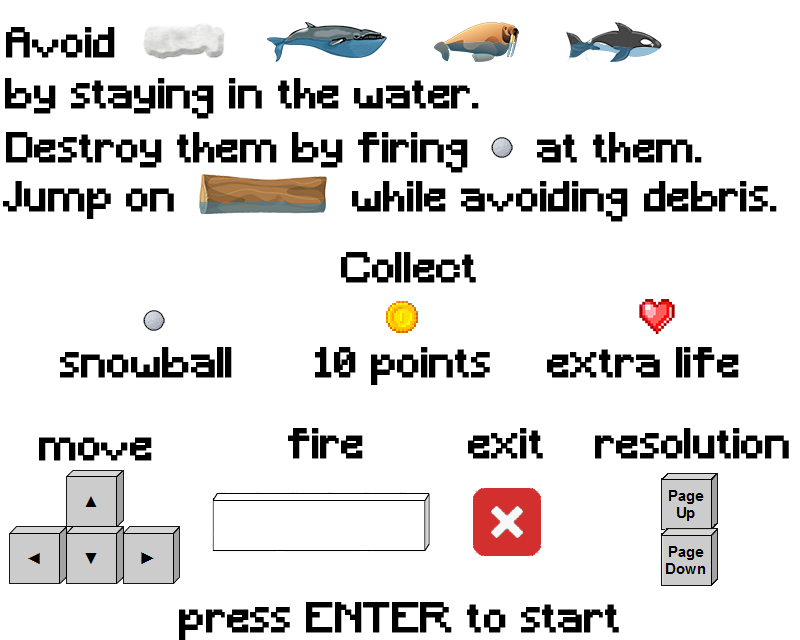
<style>
.page{position:relative;width:800px;height:640px;background:#ffffff}
.page>*{position:absolute;margin:0}
.t1{font:40px "Minecraft";color:#000000;font-weight:bold}
</style>
<div class="page">
<p class="t1" style="left:6px;top:27px;width:109px;height:31px">Avoid</p>
<p class="t1" style="left:5px;top:78px;width:474px;height:41px">by staying in the water.</p>
<p class="t1" style="left:6px;top:132px;width:696px;height:41px">Destroy them by firing     at them.</p>
<p class="t1" style="left:3px;top:181px;width:774px;height:41px">Jump on             while avoiding debris.</p>
<p class="t1" style="left:341px;top:252px;width:135px;height:31px">Collect</p>
<p class="t1" style="left:60px;top:347px;width:679px;height:38px">snowball      10 points    extra life</p>
<p class="t1" style="left:39px;top:437px;width:113px;height:24px">move</p>
<p class="t1" style="left:288px;top:428px;width:75px;height:31px">fire</p>
<p class="t1" style="left:468px;top:428px;width:75px;height:31px">exit</p>
<p class="t1" style="left:595px;top:428px;width:194px;height:31px">resolution</p>
<p class="t1" style="left:179px;top:602px;width:440px;height:38px">press ENTER to start</p>
</div>
